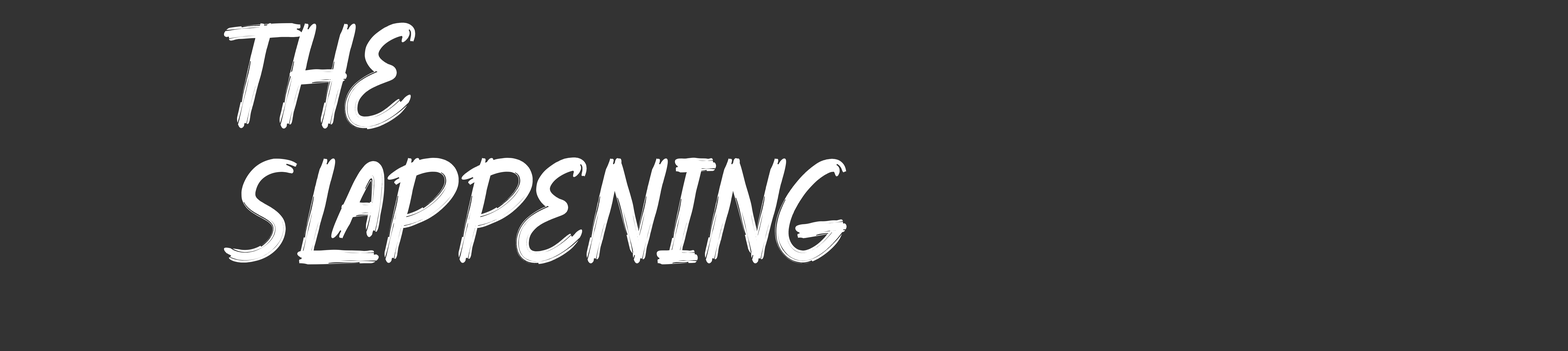
<style>
.page{position:relative;width:1568px;height:351px;background:#333333}
.page>*{position:absolute;margin:0}
.t1{font:112px "HmrileFree";color:#ffffff}
</style>
<div class="page">
<p class="t1" style="left:224px;top:23px;width:623px;height:241px">The <br>Slappening</p>
</div>
